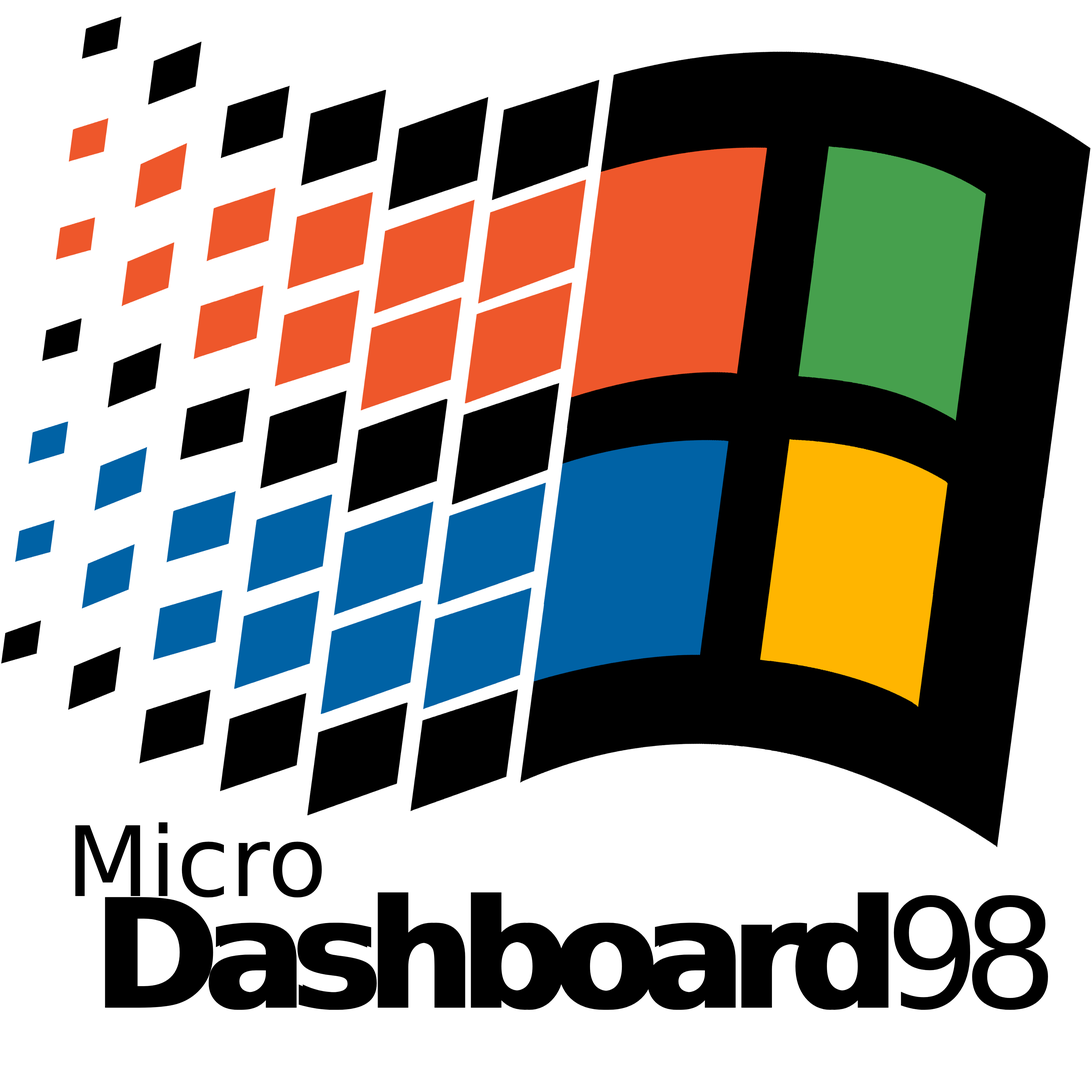
<style>
.page{position:relative;width:1092px;height:1092px;background:#ffffff}
.page>*{position:absolute;margin:0}
.t1{font:97.1px "DejaVuSans";color:#000000}
.t2{font:151.7px "DejaVuSans-Bold";letter-spacing:-0.125em;color:#000000;font-weight:bold}
.t3{font:151.7px "DejaVuSans";letter-spacing:-0.125em;color:#000000}
</style>
<div class="page">
<p class="t1" style="left:75px;top:822px;width:247px;height:76px">Micro</p>
<p class="t2" style="left:105px;top:892px;width:943px;height:118px">Dashboard<span class="t3">98</span></p>
</div>
